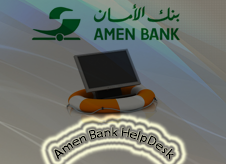
<style>
.page{position:relative;width:226px;height:164px}
.page>*{position:absolute;margin:0}
.t1{font:12px "MyriadPro-Regular";color:#000000}
</style>
<div class="page">
<p class="t1" style="left:54px;top:127px;width:120px;height:33px">Amen Bank HelpDesk</p>
</div>
